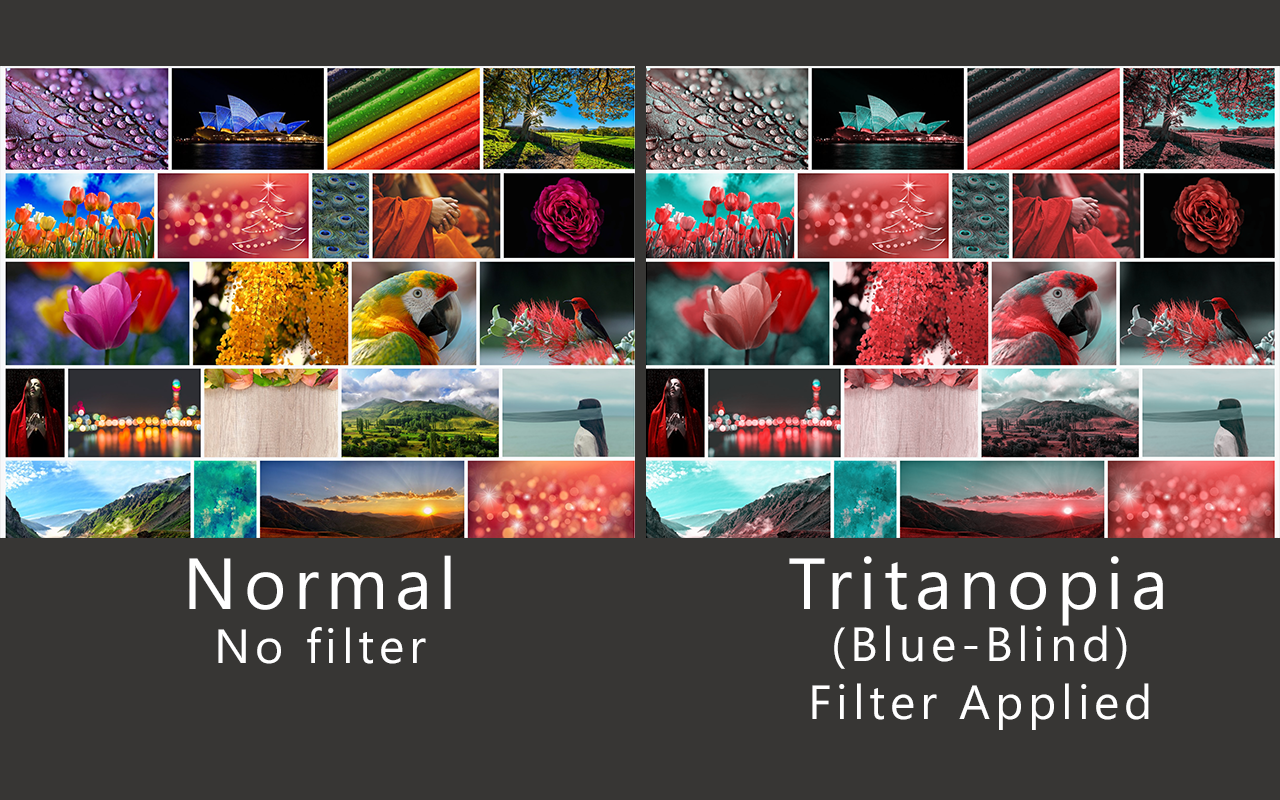
<style>
.page{position:relative;width:1280px;height:800px;background:#373634}
.page>*{position:absolute;margin:0}
.t1{font:72px "SegoeUI";letter-spacing:0.1em;color:#ffffff}
.t2{font:48px "SegoeUI";letter-spacing:0.1em;color:#ffffff}
</style>
<div class="page">
<p class="t1" style="left:189px;top:555px;width:262px;height:55px">Normal</p>
<p class="t1" style="left:789px;top:556px;width:374px;height:70px">Tritanopia</p>
<p class="t2" style="left:218px;top:627px;width:208px;height:37px">No filter</p>
<p class="t2" style="left:812px;top:625px;width:337px;height:105px;text-align:center">(Blue-Blind)<br>Filter Applied</p>
</div>
